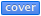
<style>
.page{position:relative;width:41px;height:16px}
.page>*{position:absolute;margin:0}
.t1{font:11px "LucidaGrande-Bold";color:#ededed}
</style>
<div class="page">
<p class="t1" style="left:5px;top:5px;width:31px;height:6px">cover</p>
</div>
